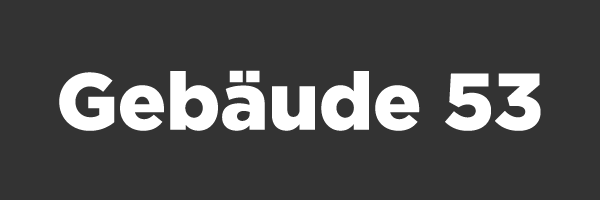
<style>
.page{position:relative;width:600px;height:200px;background:#333333}
.page>*{position:absolute;margin:0}
.t1{font:80px "Gotham-Black";color:#ffffff}
</style>
<div class="page">
<p class="t1" style="left:59px;top:70px;width:482px;height:61px">Gebäude 53</p>
</div>
